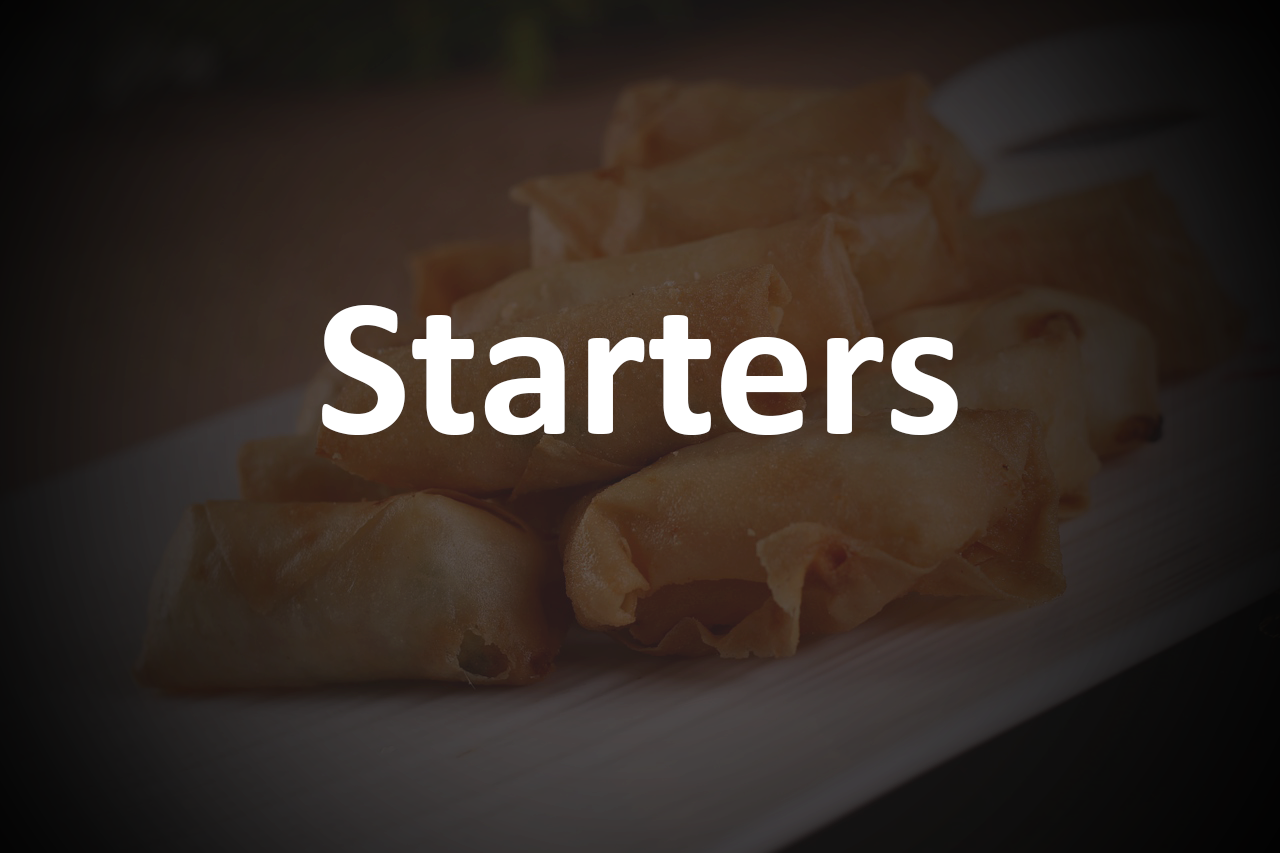
<style>
.page{position:relative;width:1280px;height:853px}
.page>*{position:absolute;margin:0}
.t1{font:200px "Calibri-Bold";color:#ffffff}
</style>
<div class="page">
<p class="t1" style="left:322px;top:305px;width:636px;height:130px">Starters</p>
</div>
